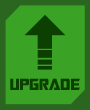
<style>
.page{position:relative;width:90px;height:110px;background:#3aa225}
.page>*{position:absolute;margin:0}
.t1{font:18px "TransformersMovie";letter-spacing:0.02em;color:#0b4000}
.t2{font:18px "TransformersMovie";color:#0b4000}
.t3{font:18px "TransformersMovie";letter-spacing:0.04em;color:#0b4000}
</style>
<div class="page">
<p class="t1" style="left:10px;top:78px;width:70px;height:12px">Upg<span class="t2">ra</span><span class="t3">d</span><span class="t2">e</span></p>
</div>
